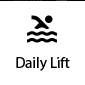
<style>
.page{position:relative;width:85px;height:85px;background:#ffffff}
.page>*{position:absolute;margin:0}
.t1{font:15px "MyriadPro-Regular";color:#000000}
</style>
<div class="page">
<p class="t1" style="left:16px;top:56px;width:54px;height:14px">Daily Lift</p>
</div>
